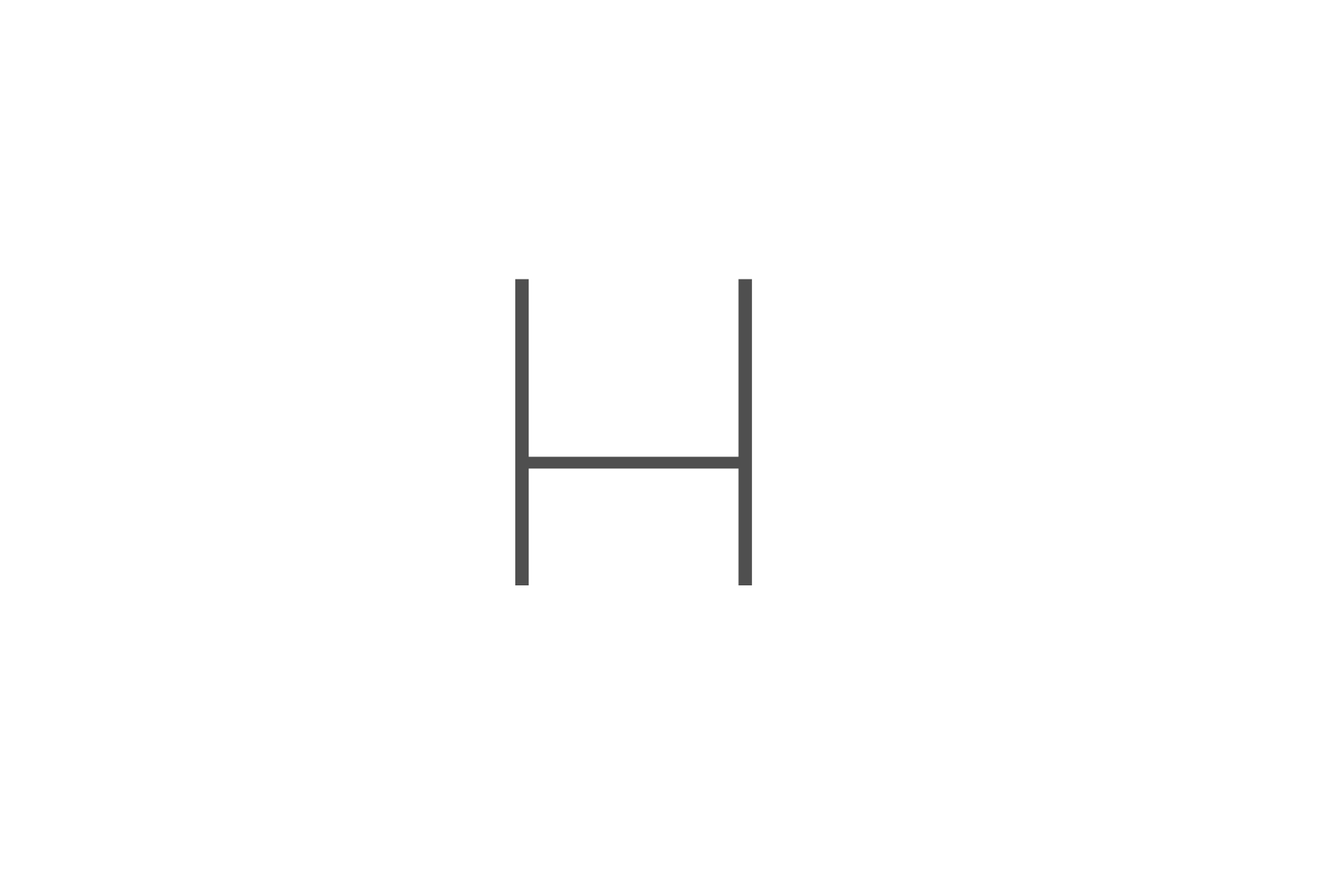
<style>
.page{position:relative;width:1337px;height:892px;background:#ffffff}
.page>*{position:absolute;margin:0}
.t1{font:408.4px "PoiretOne-Regular";color:#4f4f4f}
</style>
<div class="page">
<p class="t1" style="left:515px;top:279px;width:237px;height:306px">H</p>
</div>
